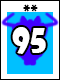
<style>
.page{position:relative;width:60px;height:80px;background:#ffffff}
.page>*{position:absolute;margin:0}
.t1{font:16.7px "ShowcardGothic-Reg";color:#000000}
.t2{font:33.3px "ShowcardGothic-Reg";color:#ffffff}
</style>
<div class="page">
<p class="t1" style="left:23px;top:4px;width:15px;height:8px">**</p>
<p class="t2" style="left:12px;top:27px;width:34px;height:27px">95</p>
</div>
